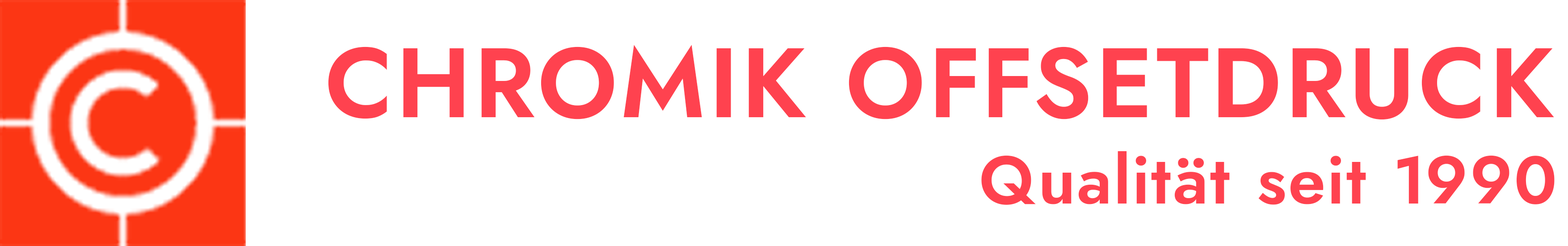
<style>
.page{position:relative;width:1568px;height:246px;background:#ffffff}
.page>*{position:absolute;margin:0}
.t1{font:98.3px "JostRoman-SemiBold";letter-spacing:0.05em;color:#ff424f}
.t2{font:67px "JostRoman-SemiBold";letter-spacing:0.05em;color:#ff424f}
</style>
<div class="page">
<p class="t1" style="left:328px;top:45px;width:1226px;height:75px">CHROMIK OFFSETDRUCK</p>
<p class="t2" style="left:981px;top:151px;width:574px;height:54px">Qualität seit 1990</p>
</div>
